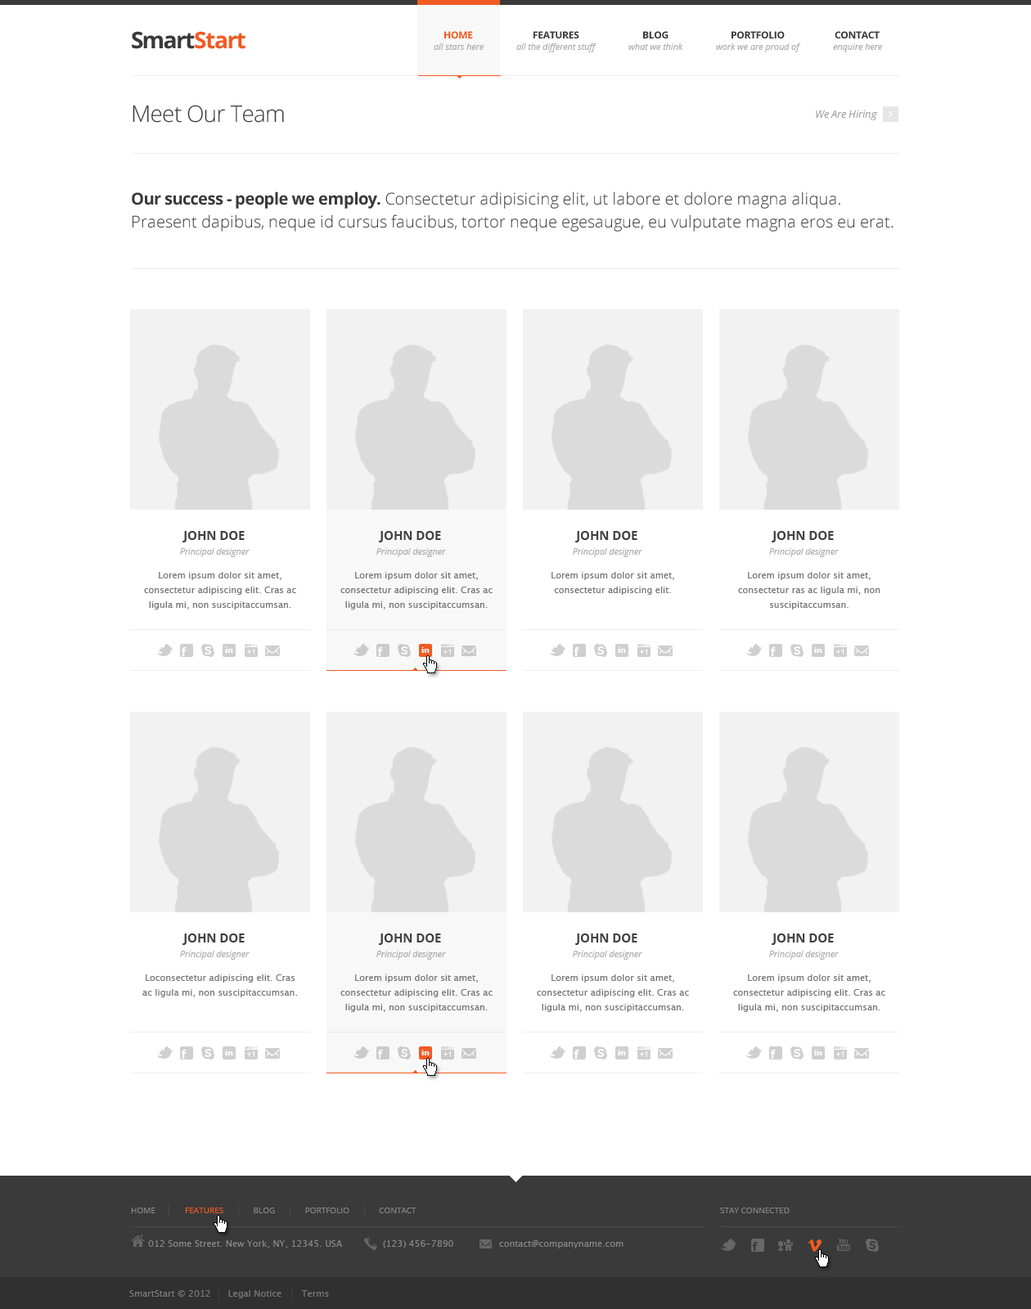
<style>
.page{position:relative;width:1031px;height:1309px;background:#ffffff}
.page>*{position:absolute;margin:0}
.t1{font:22.9px "OpenSans-Bold";letter-spacing:-0.05em;color:#f15a23}
.t2{font:22.9px "OpenSans-Bold";letter-spacing:-0.075em;color:#3a3a3a}
.t3{font:22.9px "OpenSans-Bold";letter-spacing:-0.05em;color:#3a3a3a}
.t4{font:9.8px "OpenSans-Bold";letter-spacing:-0.025em;color:#f15a23;text-transform:uppercase}
.t5{font:9.8px "OpenSans-Bold";letter-spacing:-0.025em;color:#3a3a3a;text-transform:uppercase}
.t6{font:9px "OpenSans-Italic";letter-spacing:-0.01em;color:#aeaeae}
.t7{font:22.9px "OpenSans-Light";letter-spacing:-0.025em;color:#3a3a3a}
.t8{font:10.6px "OpenSans-Italic";color:#979797}
.t9{font:16.4px/22.9px "OpenSans-Light";color:#3a3a3a}
.t10{font:16.4px/22.9px "OpenSans-Bold";letter-spacing:-0.025em;color:#3a3a3a}
.t11{font:12.6px "OpenSans-Bold";letter-spacing:-0.025em;color:#414141;text-transform:uppercase}
.t12{font:9px/14.7px "LucidaSans";color:#777777}
.t13{font:9px/19.6px "LucidaSans";color:#777777}
.t14{font:8.2px "OpenSans";color:#868686;text-transform:uppercase}
.t15{font:8.2px "OpenSans";color:#f15a23;text-transform:uppercase}
.t16{font:9px "LucidaSans";color:#868686}
</style>
<div class="page">
<p class="t1" style="left:132px;top:31px;width:113px;height:18px"><span class="t2">S</span><span class="t3">mart</span>Start</p>
<p class="t4" style="left:444px;top:31px;width:29px;height:7px">Home</p>
<p class="t5" style="left:533px;top:31px;width:46px;height:7px">Features</p>
<p class="t5" style="left:643px;top:31px;width:25px;height:7px">Blog</p>
<p class="t5" style="left:731px;top:31px;width:54px;height:7px">Portfolio</p>
<p class="t5" style="left:835px;top:31px;width:45px;height:7px">Contact</p>
<p class="t6" style="left:434px;top:43px;width:50px;height:7px">all stars here</p>
<p class="t6" style="left:516px;top:43px;width:80px;height:9px">all the different stuff</p>
<p class="t6" style="left:628px;top:43px;width:55px;height:7px">what we think</p>
<p class="t6" style="left:716px;top:43px;width:85px;height:9px">work we are proud of</p>
<p class="t6" style="left:833px;top:43px;width:49px;height:9px">enquire here</p>
<p class="t7" style="left:133px;top:105px;width:151px;height:18px">Meet Our Team</p>
<p class="t8" style="left:816px;top:110px;width:61px;height:10px">We Are Hiring</p>
<p class="t9" style="left:132px;top:191px;width:761px;height:41px"><span class="t10">Our success - people we employ.</span> Consectetur adipisicing elit, ut labore et dolore magna aliqua. <br>Praesent dapibus, neque id cursus faucibus, tortor neque egesaugue, eu vulputate magna eros eu erat.</p>
<p class="t11" style="left:182px;top:531px;width:63px;height:11px">John Doe</p>
<p class="t11" style="left:379px;top:531px;width:62px;height:11px">John Doe</p>
<p class="t11" style="left:575px;top:531px;width:62px;height:11px">John Doe</p>
<p class="t11" style="left:772px;top:531px;width:62px;height:11px">John Doe</p>
<p class="t6" style="left:180px;top:548px;width:70px;height:9px">Principal designer</p>
<p class="t6" style="left:376px;top:548px;width:70px;height:9px">Principal designer</p>
<p class="t6" style="left:573px;top:548px;width:69px;height:9px">Principal designer</p>
<p class="t6" style="left:769px;top:548px;width:70px;height:9px">Principal designer</p>
<p class="t12" style="left:144px;top:572px;width:152px;height:38px;text-align:center"><span class="t13">Lorem ipsum dolor sit a</span>met, consectetur adipiscing elit. Cras ac ligula mi, non suscipitaccumsan.</p>
<p class="t12" style="left:340px;top:572px;width:153px;height:38px;text-align:center"><span class="t13">Lorem ipsum dolor sit a</span>met, consectetur adipiscing elit. Cras ac ligula mi, non suscipitaccumsan.</p>
<p class="t12" style="left:551px;top:572px;width:123px;height:23px;text-align:center"><span class="t13">Lorem ipsum dolor sit a</span>met, consectetur adipiscing elit.</p>
<p class="t12" style="left:738px;top:572px;width:142px;height:38px;text-align:center"><span class="t13">Lorem ipsum dolor sit a</span>met, consectetur ras ac ligula mi, non suscipitaccumsan.</p>
<p class="t11" style="left:182px;top:934px;width:63px;height:11px">John Doe</p>
<p class="t11" style="left:379px;top:934px;width:62px;height:11px">John Doe</p>
<p class="t11" style="left:575px;top:934px;width:62px;height:11px">John Doe</p>
<p class="t11" style="left:772px;top:934px;width:62px;height:11px">John Doe</p>
<p class="t6" style="left:180px;top:951px;width:70px;height:9px">Principal designer</p>
<p class="t6" style="left:376px;top:951px;width:70px;height:9px">Principal designer</p>
<p class="t6" style="left:573px;top:951px;width:69px;height:9px">Principal designer</p>
<p class="t6" style="left:769px;top:951px;width:70px;height:9px">Principal designer</p>
<p class="t12" style="left:142px;top:974px;width:155px;height:23px;text-align:center"><span class="t13">Lo</span>consectetur adipiscing elit. Cras ac ligula mi, non suscipitaccumsan.</p>
<p class="t12" style="left:340px;top:974px;width:153px;height:38px;text-align:center"><span class="t13">Lorem ipsum dolor sit a</span>met, consectetur adipiscing elit. Cras ac ligula mi, non suscipitaccumsan.</p>
<p class="t12" style="left:537px;top:974px;width:152px;height:38px;text-align:center"><span class="t13">Lorem ipsum dolor sit a</span>met, consectetur adipiscing elit. Cras ac ligula mi, non suscipitaccumsan.</p>
<p class="t12" style="left:733px;top:974px;width:152px;height:38px;text-align:center"><span class="t13">Lorem ipsum dolor sit a</span>met, consectetur adipiscing elit. Cras ac ligula mi, non suscipitaccumsan.</p>
<p class="t14" style="left:131px;top:1208px;width:285px;height:5px">Home              <span class="t15">Features</span>              Blog              Portfolio              Contact</p>
<p class="t14" style="left:720px;top:1208px;width:70px;height:5px">Stay connected</p>
<p class="t16" style="left:148px;top:1240px;width:195px;height:9px">012 Some Street. New York, NY, 12345. USA</p>
<p class="t16" style="left:383px;top:1240px;width:70px;height:9px">(123) 456-7890</p>
<p class="t16" style="left:499px;top:1240px;width:124px;height:9px">contact@companyname.com</p>
<p class="t16" style="left:129px;top:1290px;width:200px;height:8px;opacity:0.85">SmartStart © 2012      Legal Notice       Terms</p>
</div>
